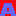
<style>
.page{position:relative;width:16px;height:16px;background:#6666ff}
.page>*{position:absolute;margin:0}
.t1{font:17px "GillSans-UltraBold";color:#6666ff}
</style>
<div class="page">
<p class="t1" style="left:0px;top:3px;width:16px;height:13px">A</p>
</div>
